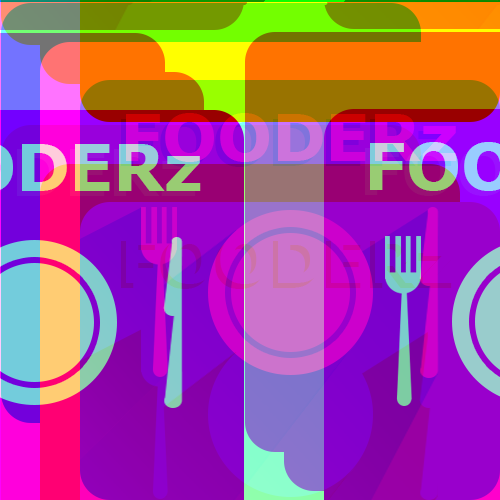
<style>
.page{position:relative;width:500px;height:500px}
.page>*{position:absolute;margin:0}
.t1{font:64.3px "Verdana-Bold"}
</style>
<div class="page">
<p class="t1" style="left:126px;top:111px;width:331px;height:49px">FOODERz</p>
</div>
